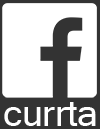
<style>
.page{position:relative;width:100px;height:129px;background:#ffffff}
.page>*{position:absolute;margin:0}
.t1{font:47.2px "Tunga";color:#ffffff}
</style>
<div class="page">
<p class="t1" style="left:4px;top:102px;width:92px;height:24px">currta</p>
</div>
